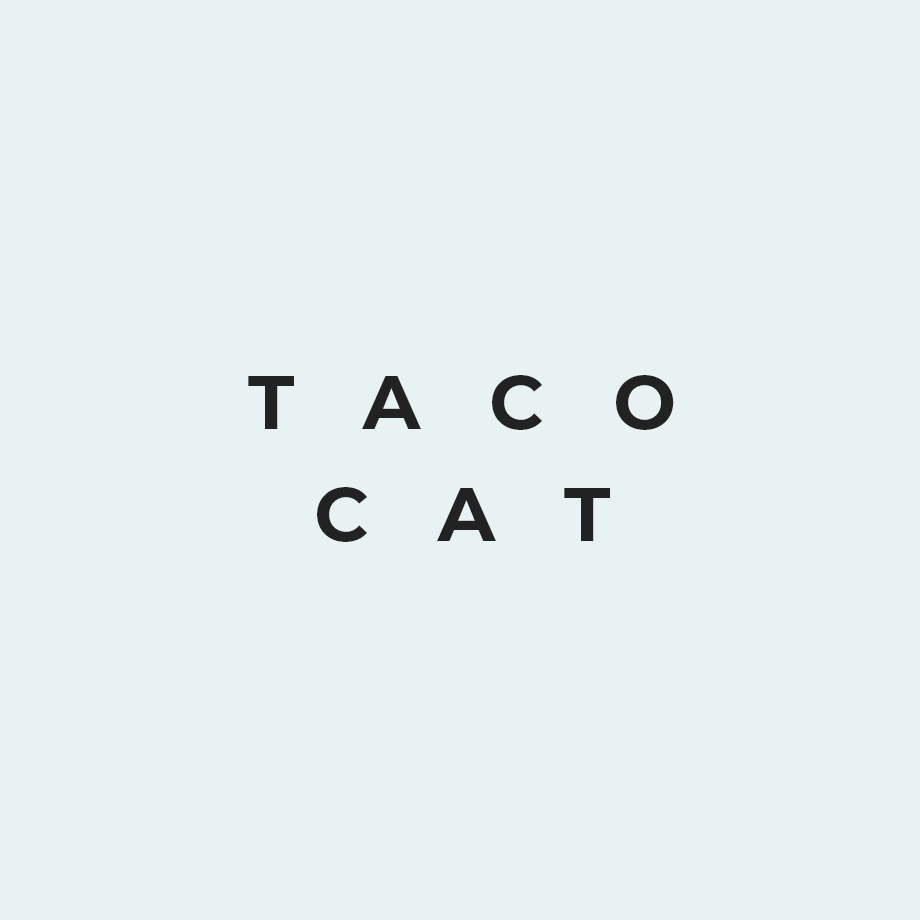
<style>
.page{position:relative;width:920px;height:920px;background:#e8f2f3}
.page>*{position:absolute;margin:0}
.t1{font:75px/112.5px "Montserrat-Bold";letter-spacing:0.92em;color:#222222}
</style>
<div class="page">
<p class="t1" style="left:248px;top:375px;width:426px;height:167px;text-align:center">TACO<br>CAT</p>
</div>
